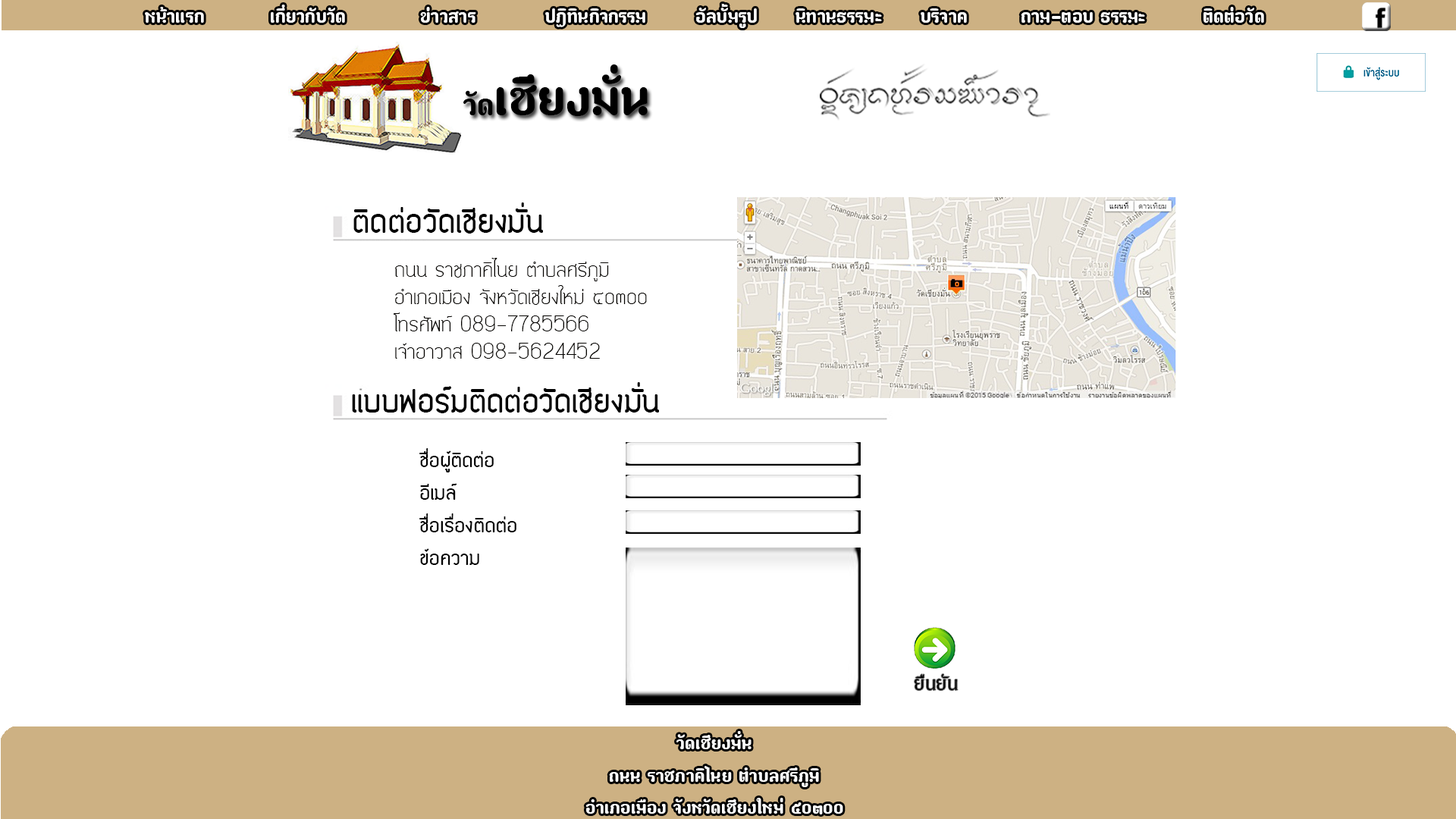
<style>
.page{position:relative;width:1456px;height:819px;background:#ffffff}
.page>*{position:absolute;margin:0}
.t1{font:27.3px "paaymaay";color:#f9f9f9}
.t2{font:73.6px "paaymaay";color:#000000}
.t3{font:44.2px "paaymaay";color:#000000}
.t4{font:36.4px "EDPenSook-NormalToneBold";color:#020202}
.t5{font:22.7px "EDPenSook-normaltone";color:#050300}
.t6{font:22.7px/32.6px "EDPenSook-NormalToneBold";color:#020202}
.t7{font:27.3px "PGVIM";color:#020202}
.t8{font:26.9px "paaymaay";color:#fdfdfc}
</style>
<div class="page">
<p class="t1" style="left:145px;top:4px;width:1119px;height:24px">หน้าแรก    เกี่ยวกับวัด    ข่าวสาร    ปฏิทินกิจกรรม   อัลบั้มรูป  นิทานธรรมะ  บริจาค   ถาม-ตอบ ธรรมะ    ติดต่อวัด</p>
<p class="t2" style="left:463px;top:64px;width:185px;height:52px"><span class="t3">วัด</span>เชียงมั่น</p>
<p class="t4" style="left:353px;top:202px;width:190px;height:32px">ติดต่อวัดเชียงมั่น</p>
<p class="t5" style="left:393px;top:258px;width:254px;height:101px">ถนน ราชภาคิไนย ตำบลศรีภูมิ<br>อำเภอเมือง จังหวัดเชียงใหม่ ๕o๓oo<br>โทรศัพท์ 089-7785566<br>เจ้าอาวาส 098-5624452</p>
<p class="t4" style="left:352px;top:382px;width:307px;height:31px">แบบฟอร์มติดต่อวัดเชียงมั่น</p>
<p class="t6" style="left:419px;top:448px;width:97px;height:117px;text-align:right">ชื่อผู้ติดต่อ<br>อีเมล์<br>ชื่อเรื่องติดต่อ<br>ข้อความ</p>
<p class="t7" style="left:915px;top:674px;width:43px;height:16px">ยืนยัน</p>
<p class="t8" style="left:585px;top:731px;width:258px;height:83px;text-align:center">วัดเชียงมั่น<br>ถนน ราชภาคิไนย ตำบลศรีภูมิ<br>อำเภอเมือง จังหวัดเชียงใหม่ ๕o๓oo</p>
</div>
